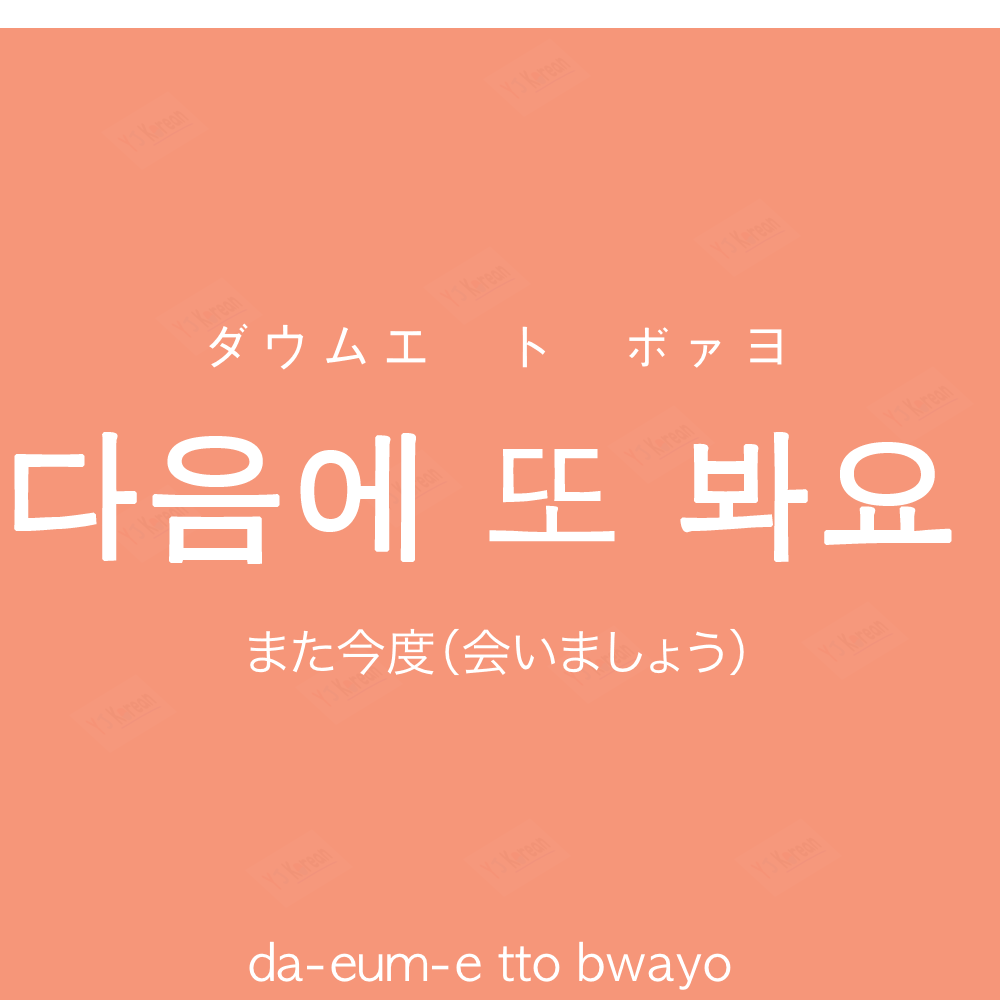
<style>
.page{position:relative;width:1000px;height:1000px;background:#f69679}
.page>*{position:absolute;margin:0}
.t1{font:60px "AppleGothic";color:#ffffff}
.t2{font:140px "AppleGothic";color:#ffffff;font-weight:bold}
.t3{font:50px "HiraKakuProN-W3";color:#ffffff}
.t4{font:50px "AppleGothic";color:#ffffff}
</style>
<div class="page">
<p class="t1" style="left:209px;top:323px;width:573px;height:47px">ダウムエ　ト　ボァヨ</p>
<p class="t2" style="left:14px;top:432px;width:938px;height:132px">다음에 또 봐요</p>
<p class="t3" style="left:249px;top:628px;width:495px;height:48px">また今度（会いましょう）</p>
<p class="t4" style="left:249px;top:941px;width:482px;height:49px">da-eum-e tto bwayo</p>
</div>
